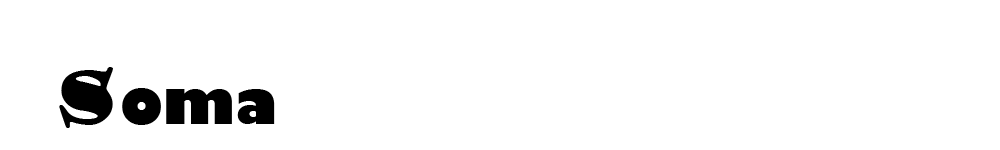
<style>
.page{position:relative;width:1000px;height:150px;background:#ffffff}
.page>*{position:absolute;margin:0}
.t1{font:60px "GillSans-UltraBold";color:#000000}
.t2{font:72px "GoudyStout";color:#000000}
</style>
<div class="page">
<p class="t1" style="left:59px;top:67px;width:216px;height:61px"><span class="t2">s</span>oma</p>
</div>
